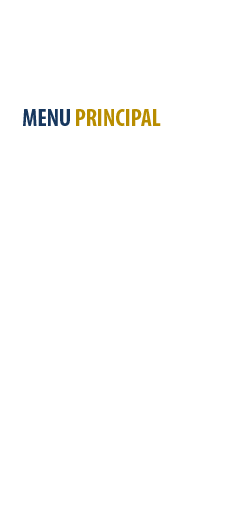
<style>
.page{position:relative;width:251px;height:517px;background:#ffffff}
.page>*{position:absolute;margin:0}
.t1{font:24px "MyriadPro-BoldCond";color:#b88d00}
.t2{font:24px "MyriadPro-BoldCond";color:#17375e}
</style>
<div class="page">
<p class="t1" style="left:23px;top:109px;width:138px;height:17px"><span class="t2">MENU </span>PRINCIPAL</p>
</div>
